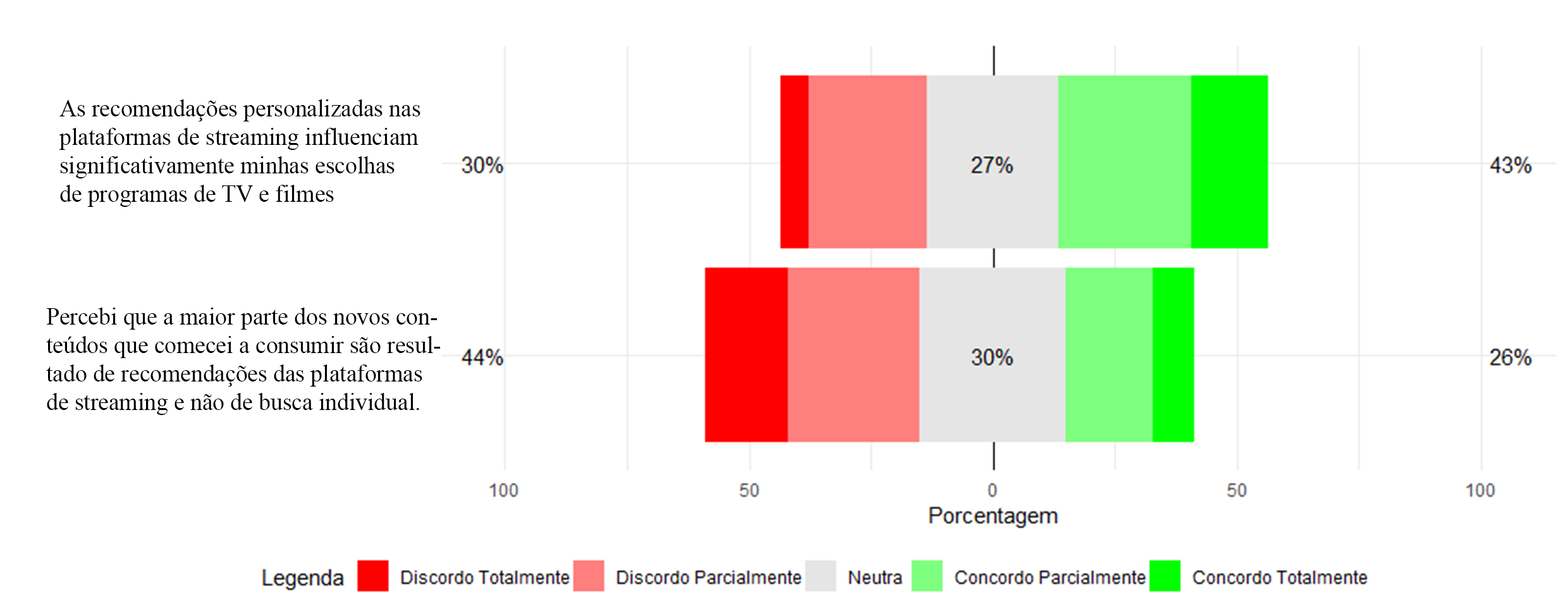
<style>
.page{position:relative;width:1568px;height:615px;background:#ffffff}
.page>*{position:absolute;margin:0}
.t1{font:23.7px "TimesNewRomanPSMT";color:#000000}
</style>
<div class="page">
<p class="t1" style="left:59px;top:99px;width:361px;height:108px">As recomendações personalizadas nas <br>plataformas de streaming influenciam <br>significativamente minhas escolhas <br>de programas de TV e filmes</p>
<p class="t1" style="left:46px;top:307px;width:395px;height:108px">Percebi que a maior parte dos novos con-<br>teúdos que comecei a consumir são resul-<br>tado de recomendações das plataformas <br>de streaming e não de busca individual.</p>
</div>
